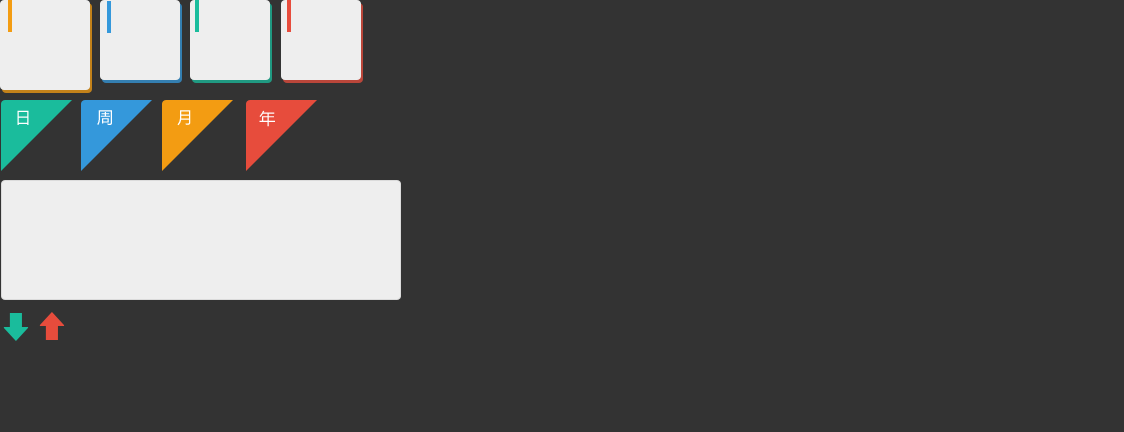
<style>
.page{position:relative;width:1124px;height:432px;background:#333333}
.page>*{position:absolute;margin:0}
.t1{font:16px "MicrosoftYaHei";color:#ffffff}
</style>
<div class="page">
<p class="t1" style="left:17px;top:110px;width:12px;height:15px">日</p>
<p class="t1" style="left:97px;top:110px;width:15px;height:15px">周</p>
<p class="t1" style="left:177px;top:110px;width:14px;height:16px">月</p>
<p class="t1" style="left:259px;top:110px;width:16px;height:17px">年</p>
</div>
